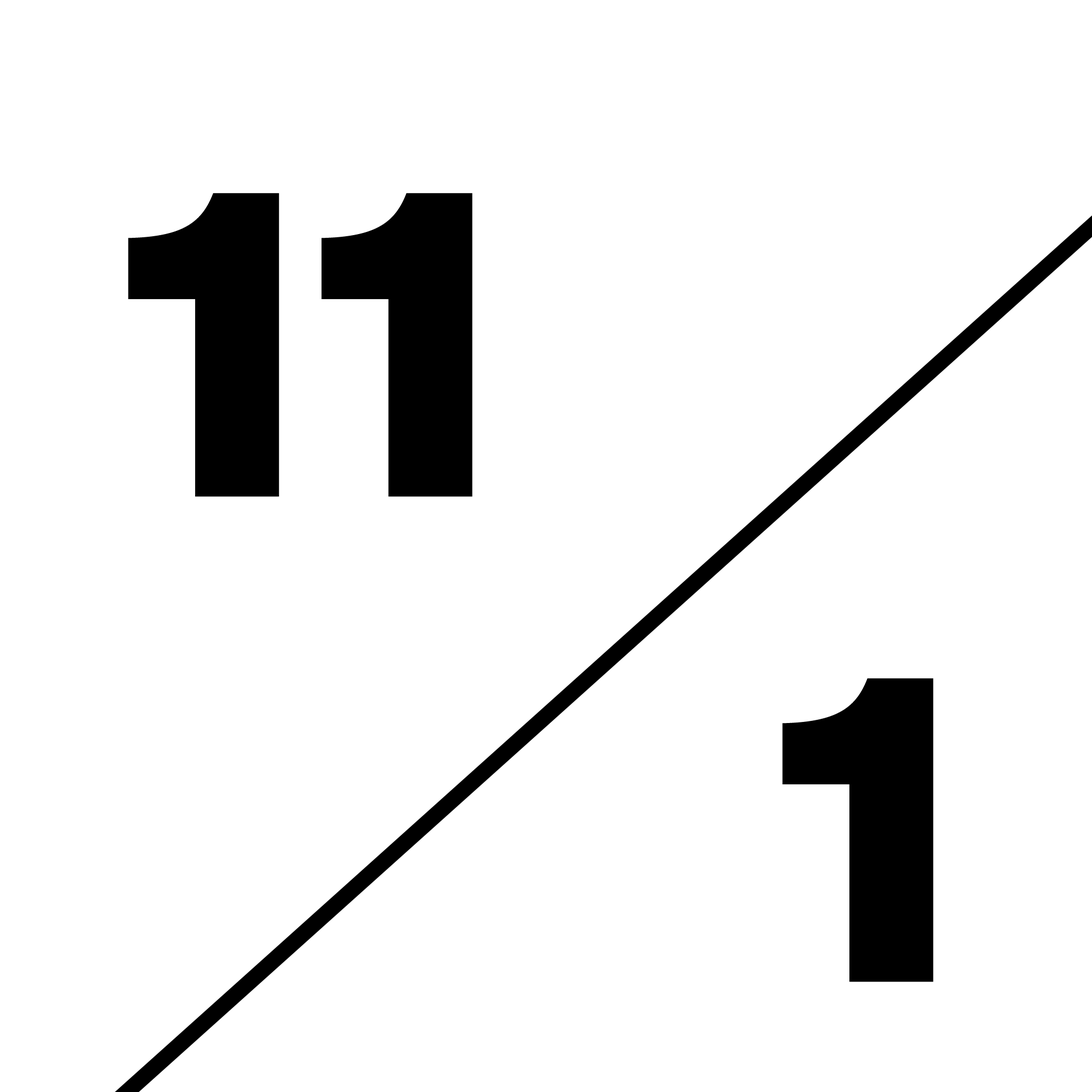
<style>
.page{position:relative;width:1092px;height:1092px;background:#ffffff}
.page>*{position:absolute;margin:0}
.t1{font:418.3px "SuisseIntl-Black";color:#000000}
</style>
<div class="page">
<p class="t1" style="left:128px;top:193px;width:344px;height:304px">11</p>
<p class="t1" style="left:782px;top:678px;width:152px;height:304px">1</p>
</div>
